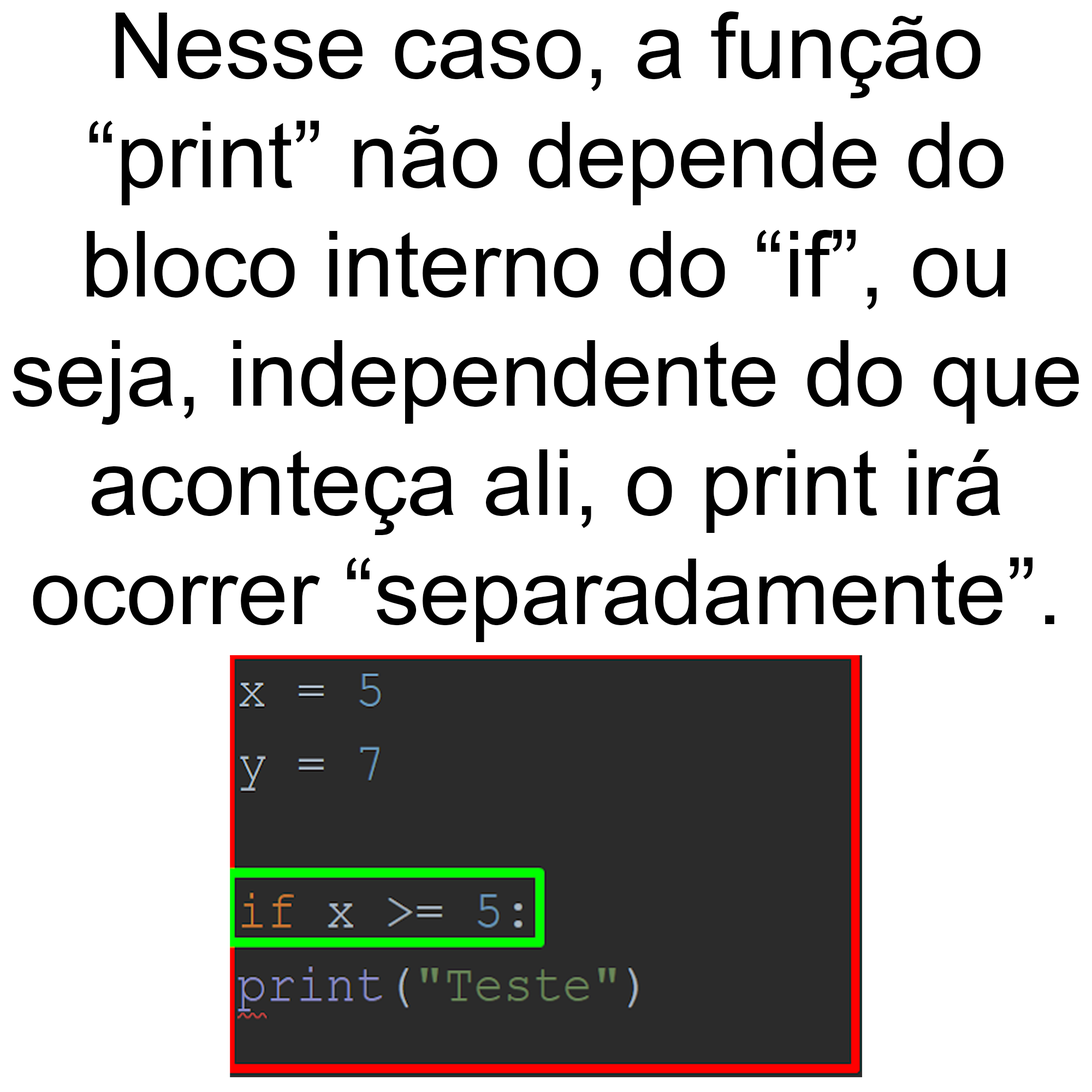
<style>
.page{position:relative;width:1092px;height:1092px;background:#ffffff}
.page>*{position:absolute;margin:0}
.t1{font:91px "ArialMT";color:#000000}
</style>
<div class="page">
<p class="t1" style="left:13px;top:11px;width:1066px;height:631px;text-align:center">Nesse caso, a função<br>“print” não depende do<br>bloco interno do “if”, ou<br>seja, independente do que<br>aconteça ali, o print irá<br>ocorrer “separadamente”.</p>
</div>
